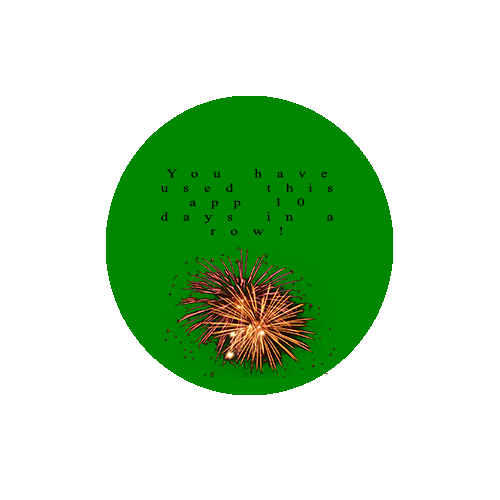
<style>
.page{position:relative;width:500px;height:500px;background:#ffffff}
.page>*{position:absolute;margin:0}
.t1{font:12px "TimesNewRomanPSMT";letter-spacing:0.985em;color:#000000;scale:1.26 1}
</style>
<div class="page">
<p class="t1" style="left:160px;top:169px;width:174px;height:67px;text-align:center">You have used this app 10 days in a row!</p>
</div>
